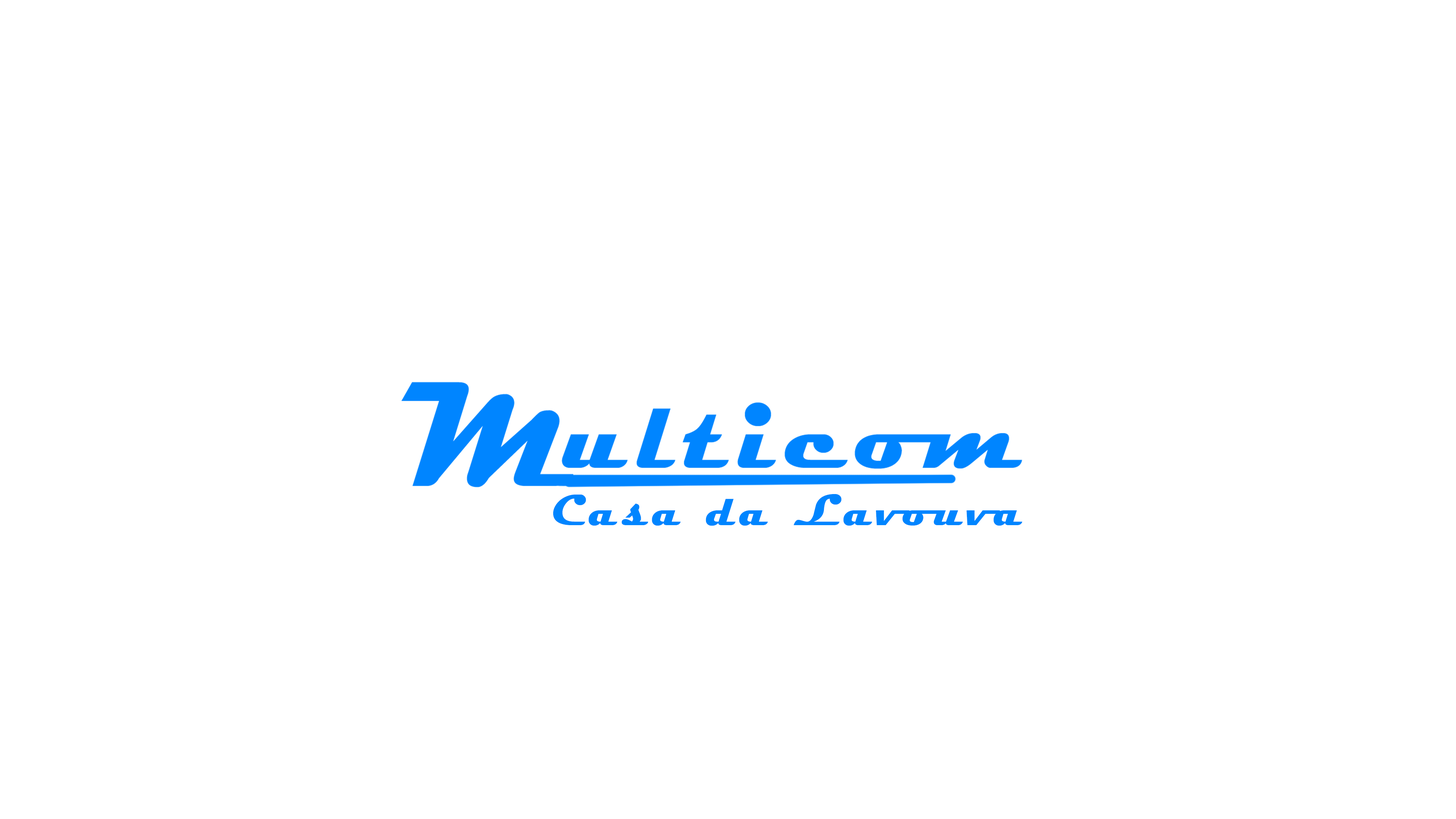
<style>
.page{position:relative;width:1456px;height:819px;background:#ffffff}
.page>*{position:absolute;margin:0}
.t1{font:44.6px "Magneto-Bold";letter-spacing:0.1em;color:#0085ff}
</style>
<div class="page">
<p class="t1" style="left:553px;top:494px;width:469px;height:32px">Casa da Lavouva</p>
</div>
